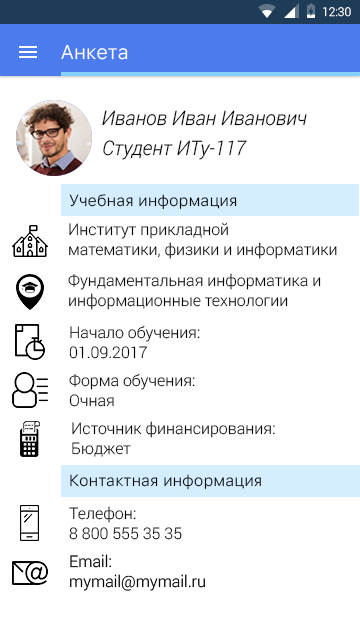
<style>
.page{position:relative;width:360px;height:640px;background:#ffffff}
.page>*{position:absolute;margin:0}
.t1{font:12px "Roboto-Light";color:#ffffff}
.t2{font:20px "SFUIText-Light";color:#ffffff}
.t3{font:20px "Roboto-LightItalic";color:#000000}
.t4{font:16px "SFUIText-Light";color:#010000}
.t5{font:16px/20px "Roboto-Light";color:#000000}
.t6{font:16px "SFUIText-Light";color:#000000}
</style>
<div class="page">
<p class="t1" style="left:323px;top:7px;width:28px;height:10px">12:30</p>
<p class="t2" style="left:61px;top:44px;width:67px;height:16px">Анкета</p>
<p class="t3" style="left:102px;top:110px;width:205px;height:16px">Иванов Иван Иванович</p>
<p class="t3" style="left:103px;top:140px;width:144px;height:20px">Студент ИТу-117</p>
<p class="t4" style="left:69px;top:194px;width:168px;height:16px">Учебная информация</p>
<p class="t5" style="left:69px;top:222px;width:268px;height:37px">Институт прикладной <br>математики, физики и информатики</p>
<p class="t5" style="left:68px;top:273px;width:253px;height:37px">Фундаментальная информатика и<br>информационные технологии</p>
<p class="t5" style="left:69px;top:325px;width:131px;height:34px">Начало обучения:<br>01.09.2017</p>
<p class="t5" style="left:69px;top:373px;width:126px;height:34px">Форма обучения:<br>Очная</p>
<p class="t5" style="left:72px;top:421px;width:203px;height:36px">Источник финансирования:<br>Бюджет</p>
<p class="t6" style="left:70px;top:474px;width:191px;height:16px">Контактная информация</p>
<p class="t5" style="left:69px;top:506px;width:113px;height:34px">Телефон:<br>8 800 555 35 35</p>
</div>
